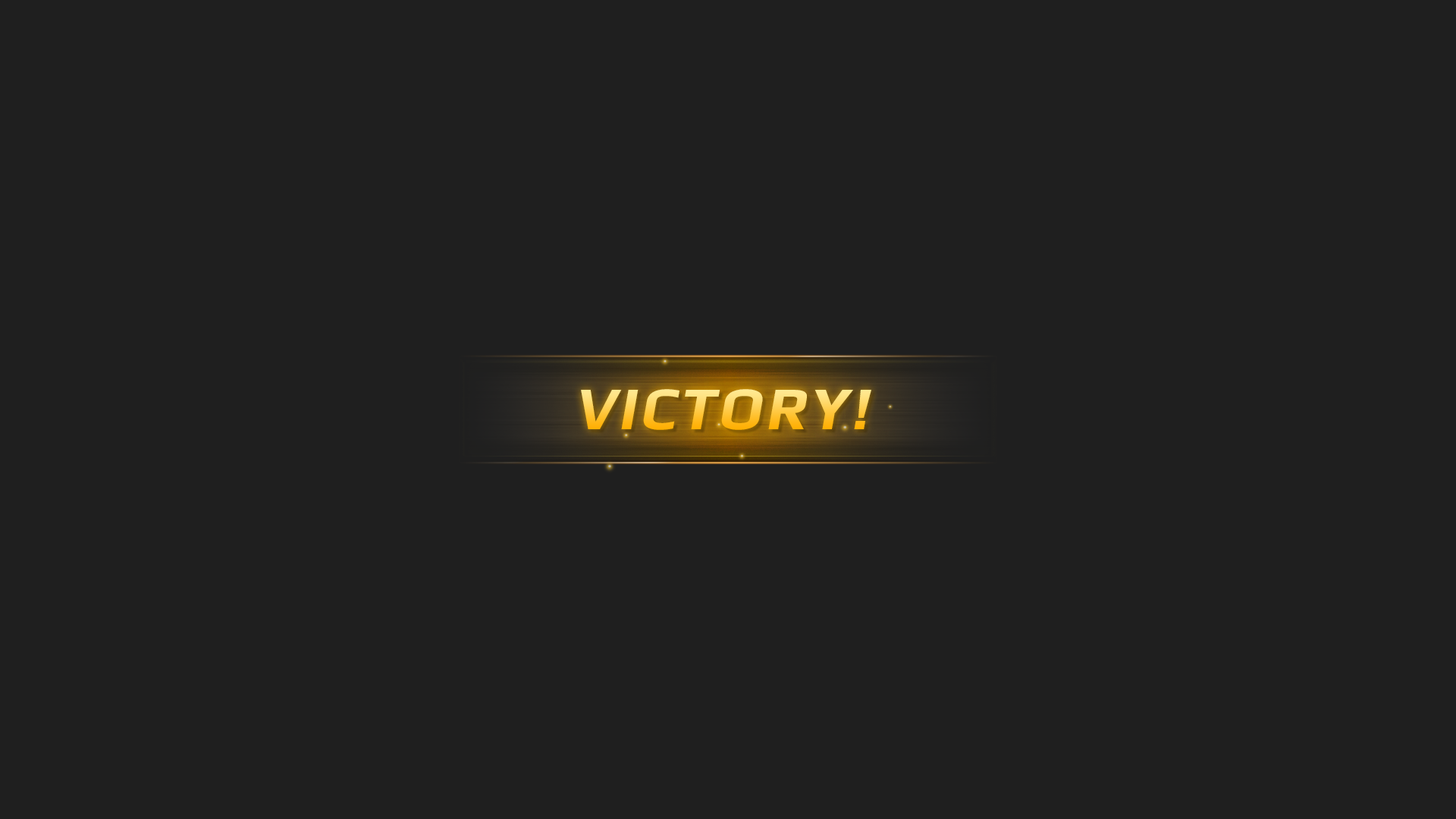
<style>
.page{position:relative;width:1456px;height:819px;background:#1f1f1f}
.page>*{position:absolute;margin:0}
.t1{font:60.7px "Play-Bold";letter-spacing:0.05em;font-style:italic}
</style>
<div class="page">
<p class="t1" style="left:581px;top:389px;width:290px;height:41px">VICTORY!</p>
</div>
